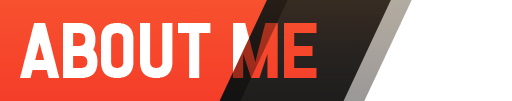
<style>
.page{position:relative;width:512px;height:101px;background:#ffffff}
.page>*{position:absolute;margin:0}
.t1{font:82.9px "GourmetHearth";color:#ffffff}
</style>
<div class="page">
<p class="t1" style="left:20px;top:23px;width:297px;height:55px">ABOUT ME</p>
</div>
